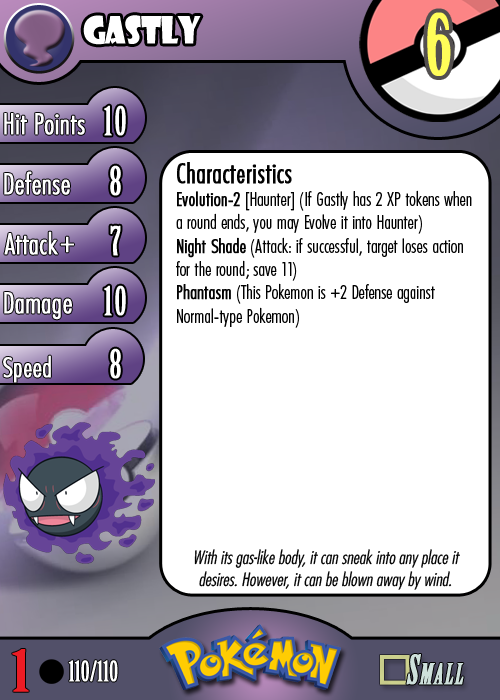
<style>
.page{position:relative;width:500px;height:700px;background:#ffffff}
.page>*{position:absolute;margin:0}
.t1{font:36.7px "ShowcardGothic-Reg";letter-spacing:-0.025em;color:#ffffff;scale:0.91 1}
.t2{font:83.3px "BirchStd";letter-spacing:0.025em;color:#fffd59;font-weight:bold}
.t3{font:27.8px "Futura-CondensedLight";color:#ffffff;font-weight:bold}
.t4{font:38.9px "BirchStd";letter-spacing:0.035em;color:#ffffff;font-weight:bold}
.t5{font:19.4px "FuturaCondensedBQ-Light";color:#010101}
.t6{font:27.8px "FuturaCondensedBQ-Light";color:#010101;font-weight:bold}
.t7{font:19.4px "FuturaCondensedBQ-Light";color:#010101;font-weight:bold}
.t8{font:30.6px "Futura-CondensedLight";color:#ffffff;font-weight:bold}
.t9{font:27.8px "FuturaCondensedBQ-Light";color:#ffffff;font-weight:bold}
.t10{font:18.1px "Futura-CondensedLight";color:#010101;font-style:italic}
.t11{font:55.6px "BirchStd";color:#ed1c24;font-weight:bold;scale:1.5 1}
.t12{font:27.8px "BirchStd";color:#ffffff;font-weight:bold}
</style>
<div class="page">
<p class="t1" style="left:83px;top:15px;width:118px;height:30px">gastly</p>
<p class="t2" style="left:427px;top:12px;width:24px;height:64px">6</p>
<p class="t3" style="left:4px;top:113px;width:81px;height:22px">Hit Points</p>
<p class="t4" style="left:104px;top:105px;width:22px;height:31px">10</p>
<p class="t3" style="left:4px;top:171px;width:66px;height:24px">Defense</p>
<p class="t4" style="left:110px;top:165px;width:11px;height:31px">8</p>
<p class="t5" style="left:176px;top:162px;width:296px;height:166px"><span class="t6">Characteristics<br></span><span class="t7">Evolution-2</span> [Haunter] (If Gastly has 2 XP tokens when a round ends, you may Evolve it into Haunter)<br><span class="t7">Night Shade</span> (Attack: if successful, target loses action for the round; save 11)<br><span class="t7">Phantasm</span> (This Pokemon is +2 Defense against Normal-type Pokemon)</p>
<p class="t3" style="left:4px;top:231px;width:54px;height:24px">Attack</p>
<p class="t4" style="left:110px;top:225px;width:11px;height:31px">7</p>
<p class="t8" style="left:60px;top:236px;width:14px;height:17px">+</p>
<p class="t3" style="left:4px;top:292px;width:68px;height:28px">Damage</p>
<p class="t4" style="left:104px;top:285px;width:22px;height:31px">10</p>
<p class="t4" style="left:110px;top:348px;width:11px;height:31px">8</p>
<p class="t9" style="left:3px;top:355px;width:48px;height:28px">Speed</p>
<p class="t10" style="left:194px;top:549px;width:266px;height:41px;text-align:center">With its gas-like body, it can sneak into any place it desires. However, it can be blown away by wind.</p>
<p class="t11" style="left:12px;top:649px;width:17px;height:43px">1</p>
<p class="t12" style="left:68px;top:660px;width:50px;height:22px">110/110</p>
</div>
